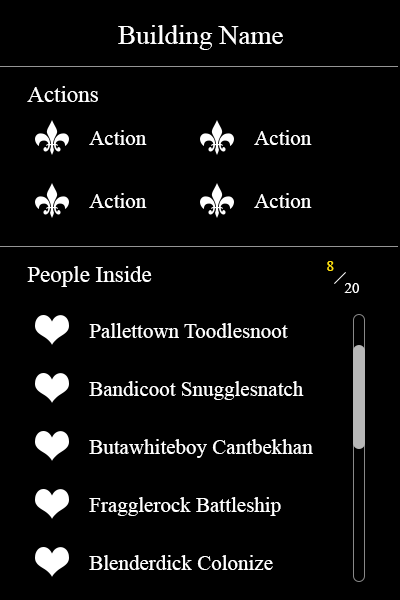
<style>
.page{position:relative;width:400px;height:600px;background:#000000}
.page>*{position:absolute;margin:0}
.t1{font:27px "TimesNewRomanPSMT";color:#ffffff}
.t2{font:23px "TimesNewRomanPSMT";color:#ffffff}
.t3{font:21px "TimesNewRomanPSMT";color:#ffffff}
.t4{font:15px "TimesNewRomanPSMT";color:#ffe012}
.t5{font:15px "TimesNewRomanPSMT";color:#ffffff}
</style>
<div class="page">
<p class="t1" style="left:118px;top:25px;width:165px;height:25px">Building Name</p>
<p class="t2" style="left:27px;top:86px;width:71px;height:16px">Actions</p>
<p class="t3" style="left:89px;top:130px;width:58px;height:15px">Action</p>
<p class="t3" style="left:254px;top:130px;width:58px;height:15px">Action</p>
<p class="t3" style="left:89px;top:193px;width:58px;height:15px">Action</p>
<p class="t3" style="left:254px;top:193px;width:58px;height:15px">Action</p>
<p class="t2" style="left:27px;top:266px;width:125px;height:21px">People Inside</p>
<p class="t4" style="left:327px;top:261px;width:7px;height:10px">8</p>
<p class="t5" style="left:344px;top:283px;width:15px;height:10px">20</p>
<p class="t3" style="left:89px;top:323px;width:199px;height:15px">Pallettown Toodlesnoot</p>
<p class="t3" style="left:89px;top:381px;width:215px;height:19px">Bandicoot Snugglesnatch</p>
<p class="t3" style="left:89px;top:439px;width:224px;height:19px">Butawhiteboy Cantbekhan</p>
<p class="t3" style="left:89px;top:497px;width:192px;height:19px">Fragglerock Battleship</p>
<p class="t3" style="left:89px;top:555px;width:184px;height:15px">Blenderdick Colonize</p>
</div>
